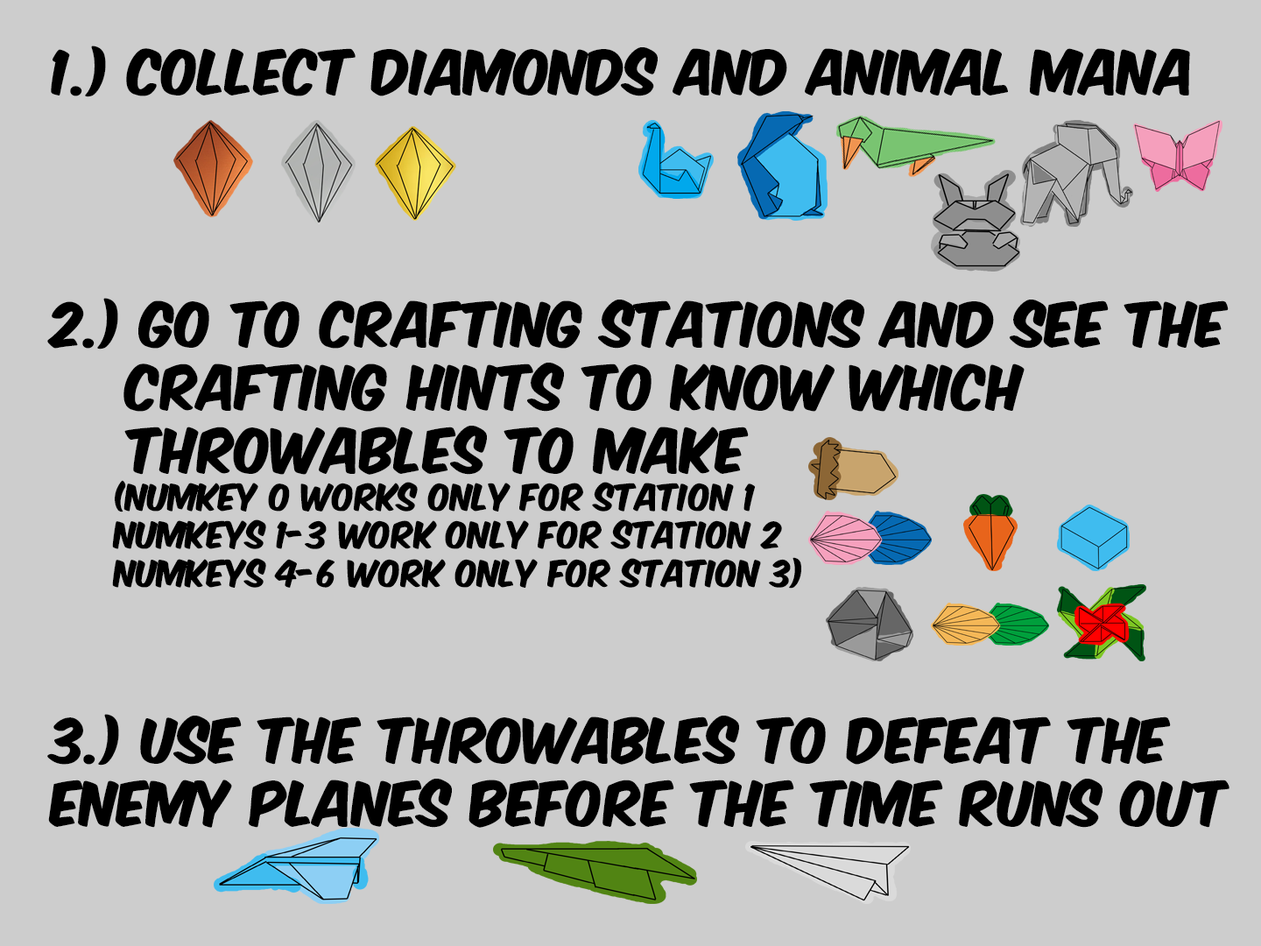
<style>
.page{position:relative;width:1261px;height:946px;background:#cdcdcd}
.page>*{position:absolute;margin:0}
.t1{font:52.5px "KomikaAxis";color:#000000}
.t2{font:31.5px "KomikaAxis";color:#000000}
</style>
<div class="page">
<p class="t1" style="left:47px;top:46px;width:1182px;height:781px">1.) collect diamonds and animal mana<br><br><br><br>2.) go to crafting stations and see the <br>    crafting hints to know which   <br>    throwables to make <br><span class="t2">  (numkey 0 works only for station 1<br>  numkeys 1-3 work only for station 2<br>  numkeys 4-6 work only for station 3)<br><br><br><br></span>3.) use the throwables to defeat the<br>enemy planes before the time runs out</p>
</div>
